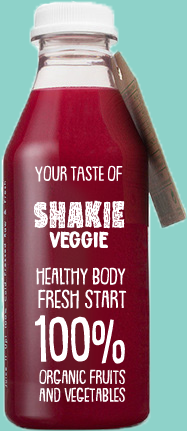
<style>
.page{position:relative;width:187px;height:431px;background:#8ed2c9}
.page>*{position:absolute;margin:0}
.t1{font:23.3px "LemonismDEMO-Regular";color:#ffffff}
.t2{font:35.9px "SnackPatrolDEMO";color:#ffffff}
.t3{font:24px "BitterbrushDEMO-Regular";color:#ffffff}
.t4{font:26.1px "LemonismDEMO-Regular";color:#ffffff}
.t5{font:28.4px "LemonismDEMO-Regular";color:#ffffff}
.t6{font:75.9px "LemonismDEMO-Regular";color:#ffffff}
.t7{font:68.7px "LemonismDEMO-Regular";color:#ffffff}
.t8{font:22px "LemonismDEMO-Regular";color:#ffffff}
.t9{font:21.7px "LemonismDEMO-Regular";color:#ffffff}
</style>
<div class="page">
<p class="t1" style="left:35px;top:165px;width:88px;height:17px">Your TASTE of</p>
<p class="t2" style="left:34px;top:200px;width:91px;height:29px">shakie</p>
<p class="t3" style="left:49px;top:231px;width:60px;height:17px">veggie</p>
<p class="t4" style="left:36px;top:267px;width:90px;height:18px">healthy body</p>
<p class="t5" style="left:38px;top:289px;width:89px;height:20px">fresh start</p>
<p class="t6" style="left:35px;top:315px;width:90px;height:49px">100<span class="t7">%</span></p>
<p class="t8" style="left:39px;top:369px;width:87px;height:16px">organic fruits</p>
<p class="t9" style="left:39px;top:387px;width:87px;height:15px">and vegetables</p>
</div>
